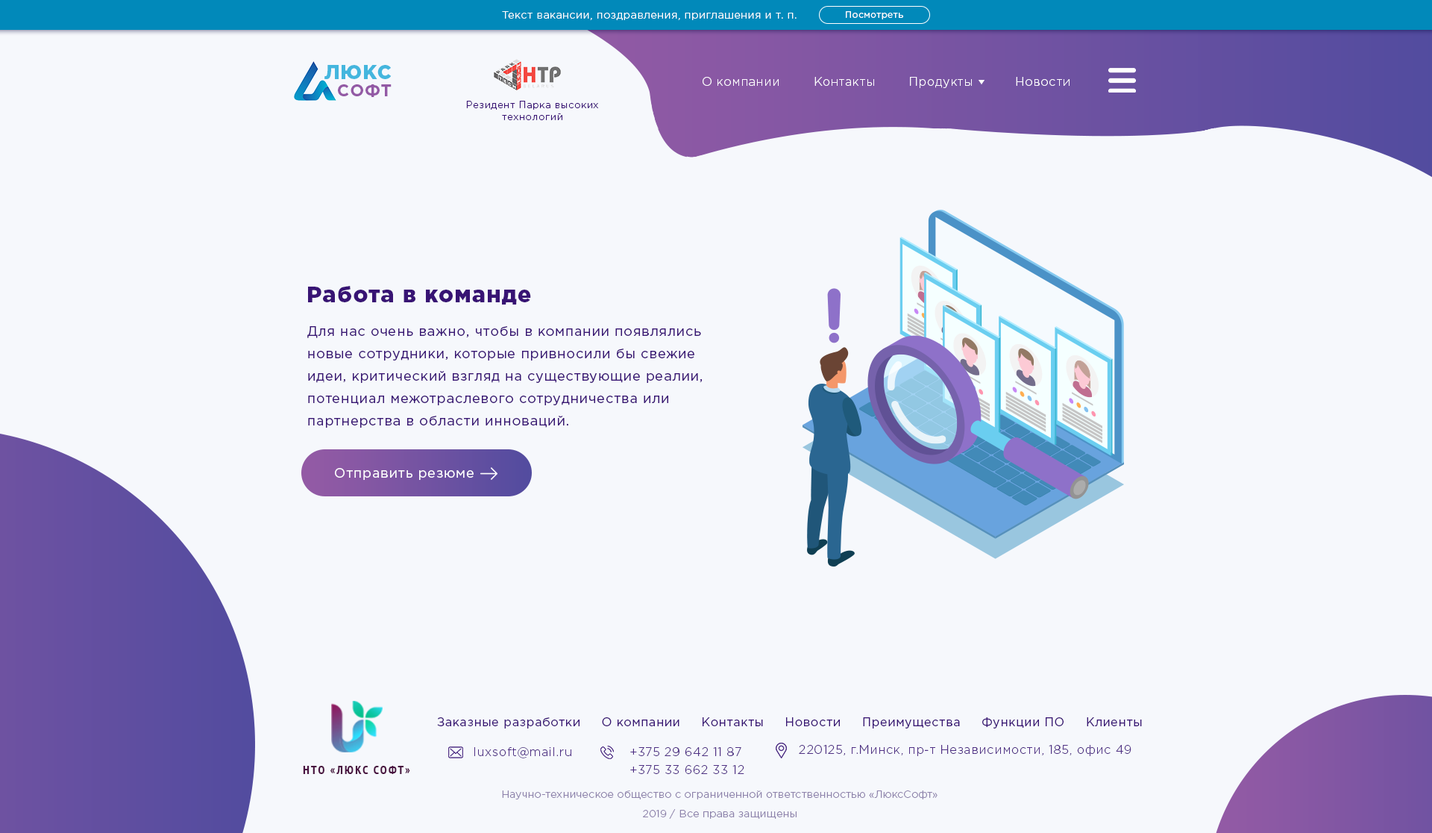
<style>
.page{position:relative;width:1432px;height:833px;background:#f6f8fc}
.page>*{position:absolute;margin:0}
.t1{font:10.4px "GothamPro-Light";letter-spacing:0.05em;color:#ffffff}
.t2{font:9px "GothamPro";letter-spacing:0.05em;color:#fefeff}
.t3{font:19.8px/17.6px "GothamPro-Black";letter-spacing:0.05em;color:#44b6de;text-transform:uppercase}
.t4{font:16.8px/17.6px "GothamPro-Bold";letter-spacing:0.05em;color:#935aa5;text-transform:uppercase}
.t5{font:11.9px "GothamPro-Light";letter-spacing:0.05em;color:#ffffff}
.t6{font:9.7px "GothamPro-Light";letter-spacing:0.05em;color:#381474}
.t7{font:22.4px "GothamPro-Black";letter-spacing:0.05em;color:#381474}
.t8{font:13.4px/22.4px "GothamPro";letter-spacing:0.05em;color:#381474}
.t9{font:13.4px "GothamPro";letter-spacing:0.05em;color:#ffffff}
.t10{font:11.9px "GothamPro";letter-spacing:0.05em;color:#381474}
.t11{font:11.9px "GothamPro-Light";letter-spacing:0.05em;color:#4f3085}
.t12{font:11.9px "PTSans-NarrowBold";letter-spacing:0.14em;color:#491240;text-transform:uppercase}
.t13{font:10.4px "GothamPro-Light";letter-spacing:0.02em;color:#8d82ab}
</style>
<div class="page">
<p class="t1" style="left:502px;top:11px;width:295px;height:9px">Текст вакансии, поздравления, приглашения и т. п.</p>
<p class="t2" style="left:846px;top:11px;width:57px;height:8px">Посмотреть</p>
<p class="t3" style="left:325px;top:65px;width:67px;height:32px">Люкс<br>  <span class="t4">софт</span></p>
<p class="t5" style="left:703px;top:77px;width:367px;height:11px">О компании        Контакты        Продукты          Новости</p>
<p class="t6" style="left:466px;top:101px;width:132px;height:19px;text-align:center">Резидент Парка высоких<br>технологий</p>
<p class="t7" style="left:308px;top:286px;width:223px;height:18px">Работа в команде</p>
<p class="t8" style="left:307px;top:326px;width:395px;height:101px">Для нас очень важно, чтобы в компании появлялись новые сотрудники, которые привносили бы свежие идеи, критический взгляд на существующие реалии, потенциал межотраслевого сотрудничества или партнерства в области инноваций.</p>
<p class="t9" style="left:335px;top:468px;width:139px;height:12px">Отправить резюме</p>
<p class="t10" style="left:437px;top:717px;width:705px;height:11px">Заказные разработки     О компании     Контакты     Новости     Преимущества     Функции ПО     Клиенты</p>
<p class="t11" style="left:474px;top:747px;width:97px;height:11px">luxsoft@mail.ru</p>
<p class="t11" style="left:630px;top:747px;width:112px;height:9px">+375 29 642 11 87</p>
<p class="t11" style="left:799px;top:745px;width:333px;height:11px">220125, г.Минск, пр-т Независимости, 185, офис 49</p>
<p class="t12" style="left:303px;top:765px;width:107px;height:9px">НТО «Люкс Софт»</p>
<p class="t11" style="left:630px;top:765px;width:115px;height:9px">+375 33 662 33 12</p>
<p class="t13" style="left:502px;top:790px;width:436px;height:9px">Научно-техническое общество с ограниченной ответственностью «ЛюксСофт»</p>
<p class="t13" style="left:643px;top:809px;width:154px;height:9px">2019 / Все права защищены</p>
</div>
